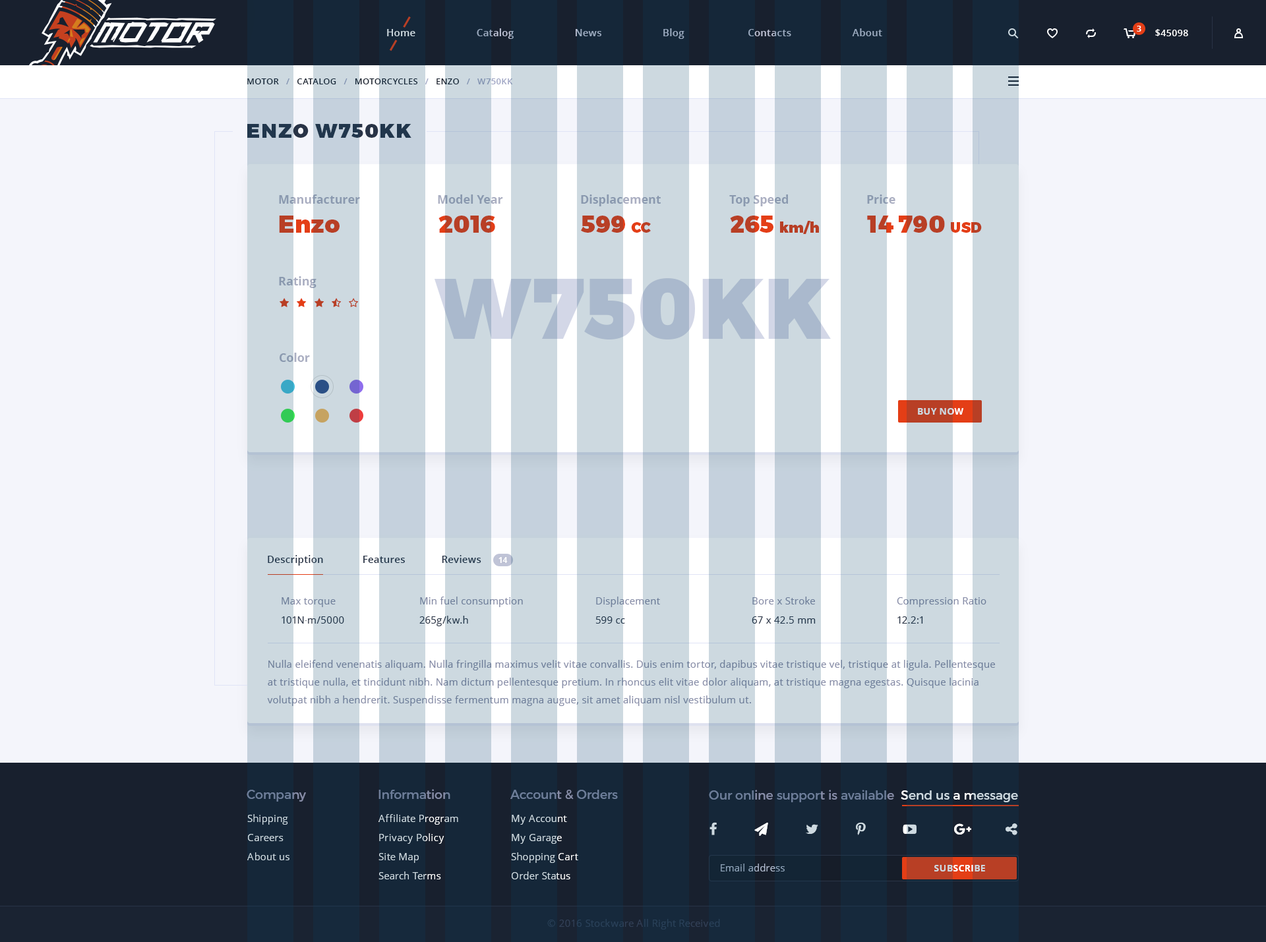
<style>
.page{position:relative;width:1266px;height:942px;background:#f4f5fb}
.page>*{position:absolute;margin:0}
.t1{font:9.9px "OpenSans-Semibold";letter-spacing:0.02em}
.t2{font:7.9px "OpenSans-Bold";color:#ffffff}
.t3{font:9.2px "OpenSans-Semibold";letter-spacing:0.02em;color:#ffffff;text-transform:uppercase}
.t4{font:8.6px "OpenSans-Semibold";letter-spacing:0.02em;color:#18202e;text-transform:uppercase}
.t5{font:8.6px "OpenSans-Semibold";letter-spacing:0.02em;color:#a0a6c5;text-transform:uppercase}
.t6{font:19.8px "Montserrat-Black";letter-spacing:0.06em;color:#283346;text-transform:uppercase}
.t7{font:11.9px "OpenSans-Bold";color:#8a99af}
.t8{font:11.9px "OpenSans-Bold"}
.t9{font:23.7px "Montserrat-Black";color:#b83f25}
.t10{font:14.5px "Montserrat-Black";color:#b83f25}
.t11{font:85.7px "Montserrat-Black";color:#aab9cd}
.t12{font:9.2px "OpenSans-Bold";letter-spacing:0.02em;color:#cdd9e0}
.t13{font:9.9px "OpenSans-Semibold";letter-spacing:0.02em;color:#283346}
.t14{font:7.9px "OpenSans-Bold";letter-spacing:0.02em;color:#ffffff}
.t15{font:9.9px/19.1px "OpenSans";letter-spacing:0.02em;color:#868ca7}
.t16{font:9.9px/19.1px "OpenSans";letter-spacing:0.02em;color:#283346}
.t17{font:9.9px/19.1px "TimesNewRomanPSMT";letter-spacing:0.02em;color:#283346}
.t18{font:9.9px/19.1px "OpenSans";letter-spacing:0.02em}
.t19{font:9.9px/17.8px "OpenSans";letter-spacing:0.02em;color:#6d7d99}
.t20{font:12.5px "Montserrat-Regular";color:#6d7d99}
.t21{font:12.5px "Montserrat-Regular"}
.t22{font:9.9px/19.1px "OpenSans";letter-spacing:0.02em;color:#cdd9e0}
.t23{font:9.9px "OpenSans";letter-spacing:0.02em}
.t24{font:9.2px "OpenSans-Bold";letter-spacing:0.02em}
.t25{font:9.9px "OpenSans";letter-spacing:0.02em;color:#324057}
</style>
<div class="page">
<p class="t1" style="left:387px;top:28px;width:495px;height:11px">Home                      Catalog                      News                      Blog                       Contacts                      About</p>
<p class="t2" style="left:1137px;top:26px;width:4px;height:6px">3</p>
<p class="t3" style="left:1155px;top:29px;width:33px;height:7px">$45098</p>
<p class="t4" style="left:247px;top:78px;width:266px;height:6px">Motor   <span class="t5">/   </span>Catalog   <span class="t5">/   </span>MOTORCYcLES   <span class="t5">/   </span>ENZO   <span class="t5">/   W750KK</span></p>
<p class="t6" style="left:247px;top:124px;width:164px;height:14px">enzo w750kk</p>
<p class="t7" style="left:279px;top:194px;width:81px;height:10px">Manufacturer</p>
<p class="t8" style="left:438px;top:194px;width:65px;height:10px">Model Year</p>
<p class="t7" style="left:581px;top:194px;width:80px;height:12px">Displacement</p>
<p class="t8" style="left:729px;top:194px;width:59px;height:12px">Top Speed</p>
<p class="t7" style="left:867px;top:194px;width:28px;height:10px">Price</p>
<p class="t9" style="left:279px;top:216px;width:61px;height:17px">Enzo</p>
<p class="t9" style="left:438px;top:216px;width:57px;height:17px">2016</p>
<p class="t9" style="left:581px;top:216px;width:70px;height:17px">599 <span class="t10">CC</span></p>
<p class="t10" style="left:730px;top:216px;width:89px;height:18px"><span class="t9">265 </span>km/h</p>
<p class="t9" style="left:867px;top:216px;width:115px;height:17px">14 790 <span class="t10">USD</span></p>
<p class="t8" style="left:279px;top:276px;width:37px;height:12px">Rating</p>
<p class="t11" style="left:434px;top:278px;width:397px;height:62px">W750KK</p>
<p class="t8" style="left:280px;top:353px;width:30px;height:9px">Color</p>
<p class="t12" style="left:918px;top:408px;width:45px;height:7px">BUY NOW</p>
<p class="t13" style="left:268px;top:555px;width:213px;height:11px">Description              Features             Reviews</p>
<p class="t14" style="left:498px;top:557px;width:10px;height:6px">14</p>
<p class="t15" style="left:281px;top:597px;width:63px;height:27px">Max torque<br><span class="t16">101N</span><span class="t17">·</span><span class="t16">m/5000</span></p>
<p class="t15" style="left:419px;top:597px;width:104px;height:29px">Min fuel consumption<br><span class="t16">265g/kw.h</span></p>
<p class="t18" style="left:595px;top:597px;width:65px;height:27px">Displacement<br>599 cc</p>
<p class="t15" style="left:752px;top:597px;width:63px;height:27px">Bore x Stroke<br><span class="t16">67 x 42.5 mm</span></p>
<p class="t18" style="left:897px;top:597px;width:89px;height:27px">Compression Ratio<br>12.2:1</p>
<p class="t19" style="left:267px;top:660px;width:728px;height:46px">Nulla eleifend venenatis aliquam. Nulla fringilla maximus velit vitae convallis. Duis enim tortor, dapibus vitae tristique vel, tristique at ligula. Pellentesque <br>at tristique nulla, et tincidunt nibh. Nam dictum pellentesque pretium. In rhoncus elit vitae dolor aliquam, at tristique magna egestas. Quisque lacinia <br>volutpat nibh a hendrerit. Suspendisse fermentum magna augue, sit amet aliquam nisl vestibulum ut.</p>
<p class="t20" style="left:247px;top:790px;width:59px;height:12px">Company</p>
<p class="t20" style="left:378px;top:789px;width:72px;height:10px">Information</p>
<p class="t20" style="left:510px;top:790px;width:108px;height:10px">Account &amp; Orders</p>
<p class="t21" style="left:709px;top:790px;width:309px;height:12px">Our online support is available  Send us a message</p>
<p class="t22" style="left:247px;top:814px;width:42px;height:46px">Shipping<br>Careers<br>About us</p>
<p class="t22" style="left:378px;top:814px;width:80px;height:65px">Affiliate Program<br>Privacy Policy<br>Site Map<br>Search Terms</p>
<p class="t22" style="left:511px;top:815px;width:67px;height:64px">My Account<br>My Garage<br>Shopping Cart<br>Order Status</p>
<p class="t23" style="left:721px;top:864px;width:64px;height:8px">Email address</p>
<p class="t24" style="left:934px;top:865px;width:51px;height:7px">SUBSCRIBE</p>
<p class="t25" style="left:547px;top:919px;width:173px;height:11px">© 2016 Stockware All Right Received</p>
</div>
